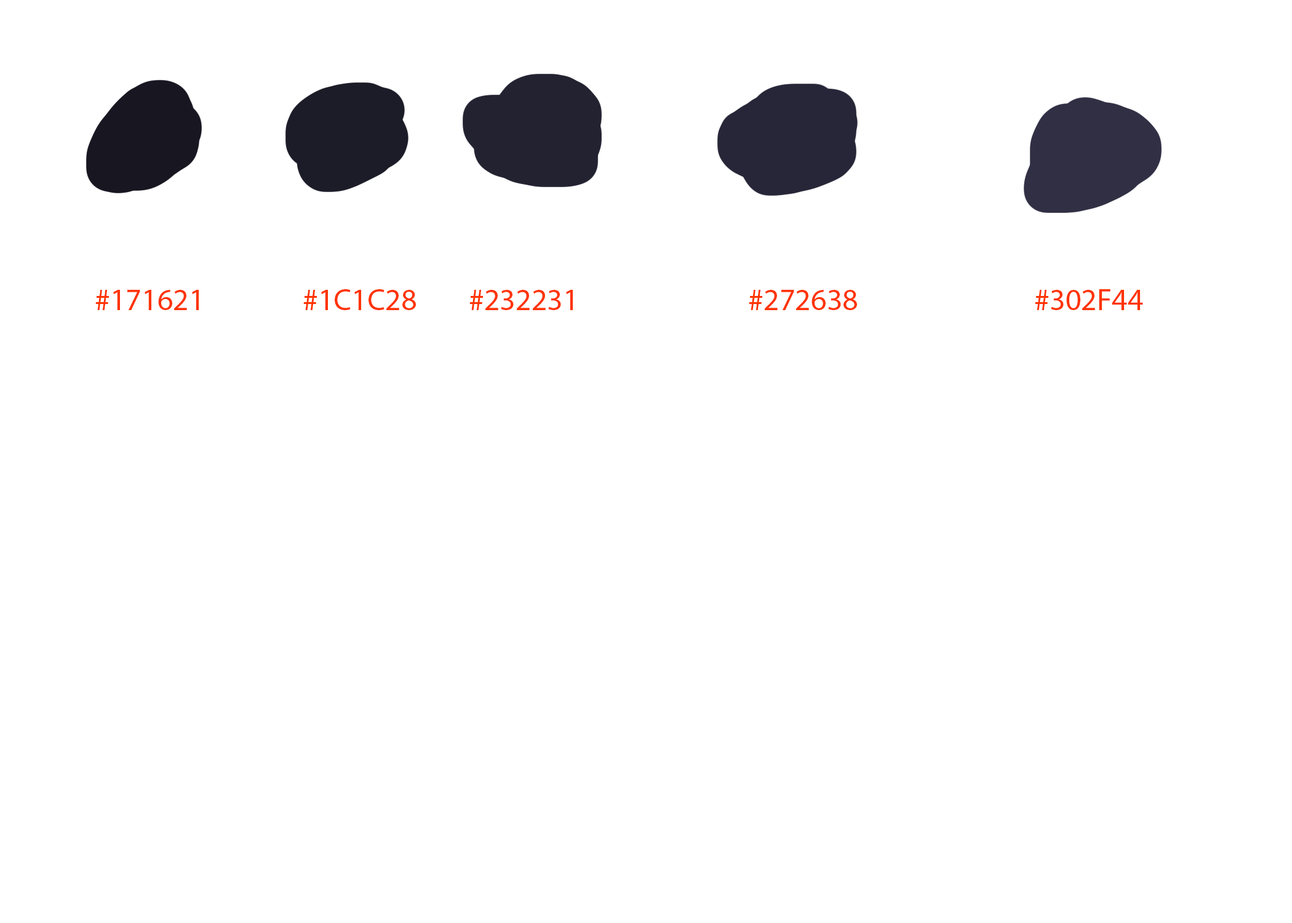
<style>
.page{position:relative;width:1292px;height:923px;background:#ffffff}
.page>*{position:absolute;margin:0}
.t1{font:30.8px "MyriadPro-Regular";color:#ff3300}
</style>
<div class="page">
<p class="t1" style="left:95px;top:289px;width:1048px;height:21px">#171621               #1C1C28        #232231                          #272638                           #302F44</p>
</div>
